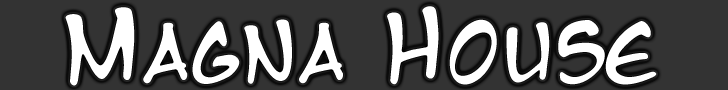
<style>
.page{position:relative;width:728px;height:90px;background:#333333}
.page>*{position:absolute;margin:0}
.t1{font:74.5px "MangaTemple";color:#ffffff}
.t2{font:91px "MangaTemple";color:#ffffff}
</style>
<div class="page">
<p class="t1" style="left:65px;top:6px;width:592px;height:80px"><span class="t2">M</span>agna<span class="t2"> H</span>ouse</p>
<p class="t1" style="left:65px;top:6px;width:592px;height:80px"><span class="t2">M</span>agna<span class="t2"> H</span>ouse</p>
</div>
